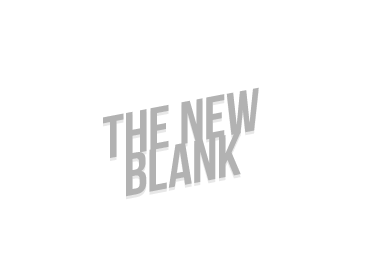
<style>
.page{position:relative;width:373px;height:280px;background:#ffffff}
.page>*{position:absolute;margin:0}
.t1{font:60px "BebasNeueBold";color:#b2b2b2}
</style>
<div class="page">
<p class="t1" style="left:103px;top:87px;width:156px;height:71px;rotate:-11deg">THE NEW</p>
<p class="t1" style="left:126px;top:132px;width:115px;height:65px;rotate:-11deg">BLANK</p>
</div>
